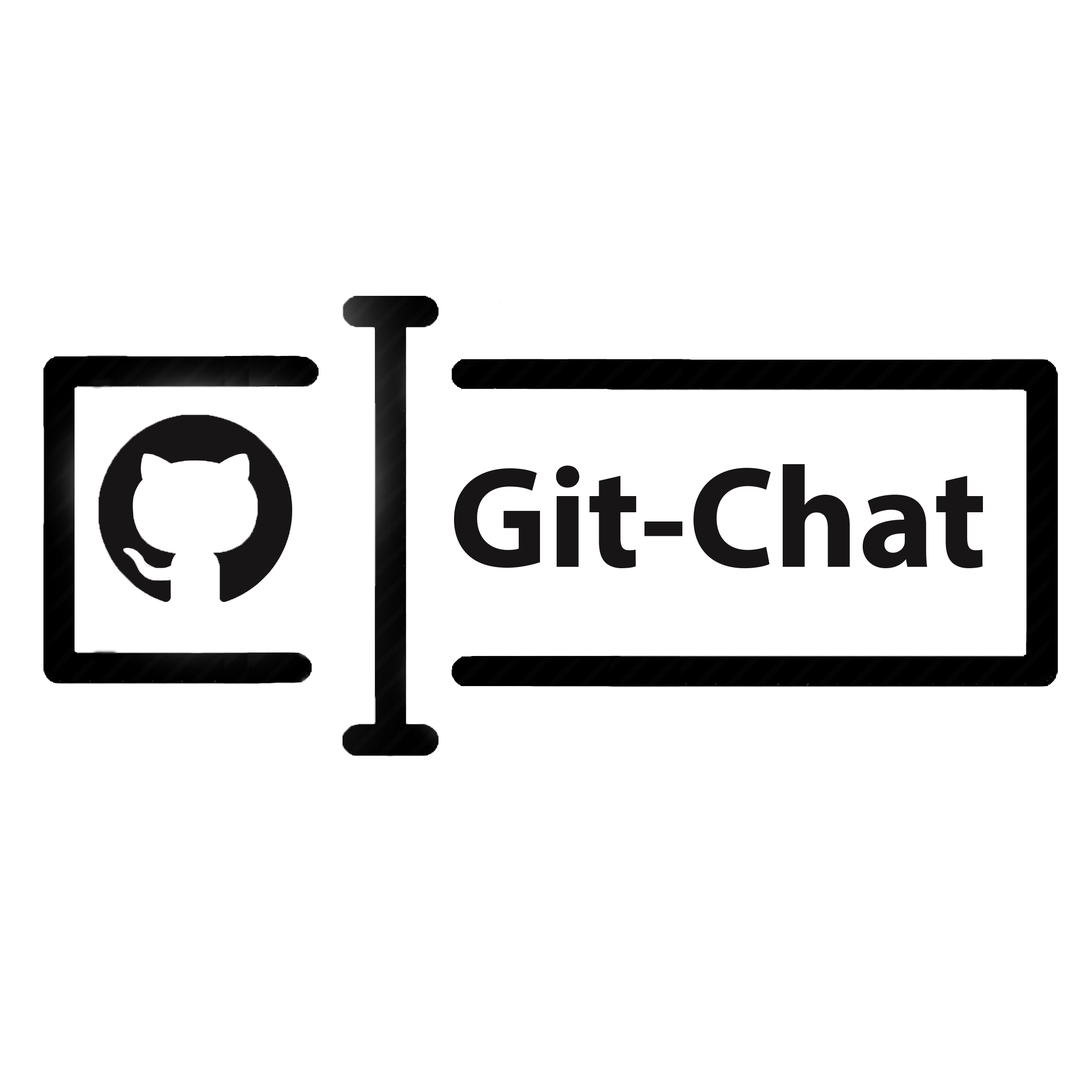
<style>
.page{position:relative;width:1092px;height:1092px;background:#ffffff}
.page>*{position:absolute;margin:0}
.t1{font:144.5px "MyriadPro-Bold";color:#171515}
</style>
<div class="page">
<p class="t1" style="left:454px;top:464px;width:529px;height:105px">Git-Chat</p>
</div>
